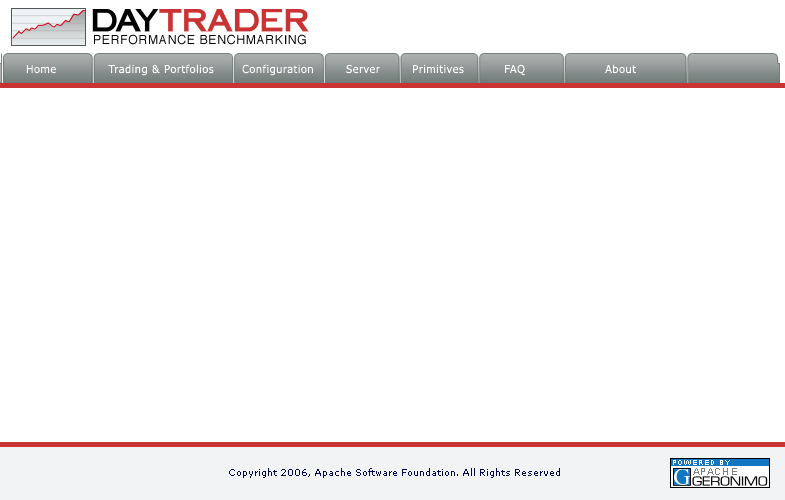
<style>
.page{position:relative;width:785px;height:500px;background:#ffffff}
.page>*{position:absolute;margin:0}
.t1{font:12.3px "Helvetica";letter-spacing:0.05em;color:#000000;text-transform:uppercase}
.t2{font:11px "Tahoma";letter-spacing:0.05em;color:#ffffff}
.t3{font:9px "Verdana";color:#000651}
</style>
<div class="page">
<p class="t1" style="left:94px;top:34px;width:212px;height:11px">Performance Benchmarking</p>
<p class="t2" style="left:26px;top:64px;width:610px;height:12px">Home             Trading &amp; Portfolios       Configuration        Server        Primitives          FAQ                    About</p>
<p class="t2" style="left:26px;top:64px;width:610px;height:12px">Home             Trading &amp; Portfolios       Configuration        Server        Primitives          FAQ                    About</p>
<p class="t3" style="left:229px;top:468px;width:331px;height:10px">Copyright 2006, Apache Software Foundation. All Rights Reserved</p>
</div>
